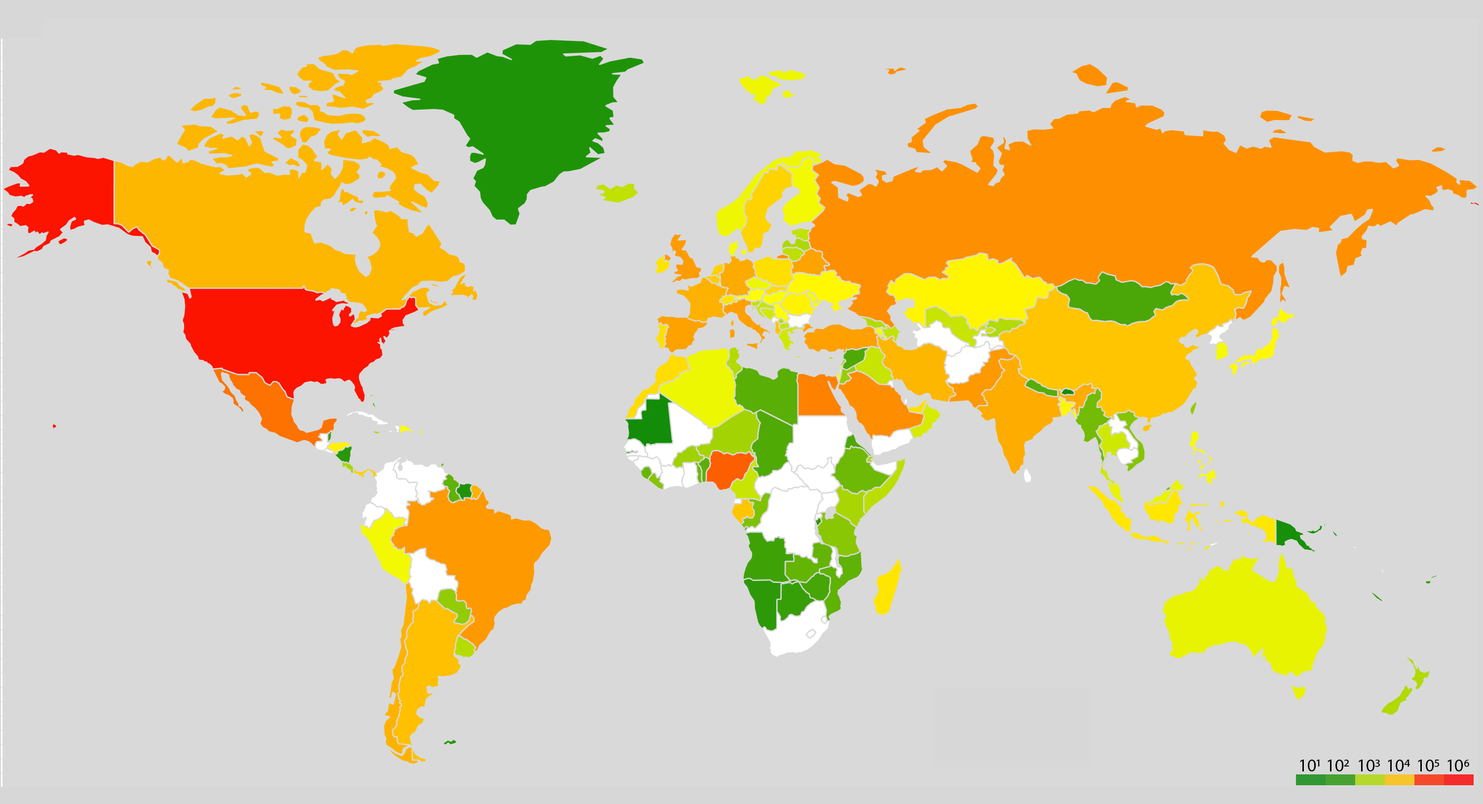
<style>
.page{position:relative;width:1483px;height:804px;background:#d9d9d9}
.page>*{position:absolute;margin:0}
.t1{font:17.8px "MyriadPro-Regular";color:#000000}
</style>
<div class="page">
<p class="t1" style="left:1300px;top:760px;width:20px;height:11px">101</p>
<p class="t1" style="left:1328px;top:760px;width:21px;height:11px">102</p>
<p class="t1" style="left:1359px;top:760px;width:21px;height:11px">103</p>
<p class="t1" style="left:1388px;top:760px;width:22px;height:11px">104</p>
<p class="t1" style="left:1418px;top:760px;width:21px;height:11px">105</p>
<p class="t1" style="left:1448px;top:760px;width:21px;height:11px">106</p>
</div>
